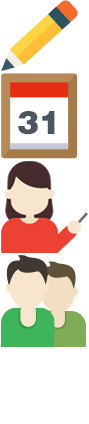
<style>
.page{position:relative;width:89px;height:424px;background:#ffffff}
.page>*{position:absolute;margin:0}
.t1{font:32.4px "FZCCHJW--GB1-0";letter-spacing:0.01em;color:#4b5662}
</style>
<div class="page">
<p class="t1" style="left:18px;top:111px;width:37px;height:24px">31</p>
</div>
